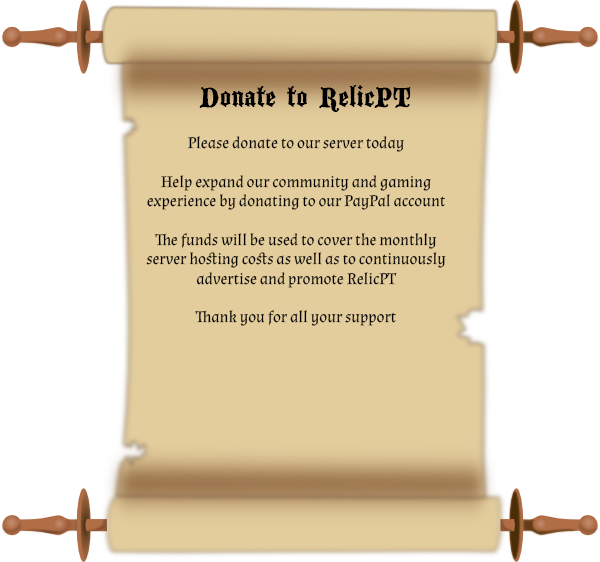
<style>
.page{position:relative;width:600px;height:562px;background:#ffffff}
.page>*{position:absolute;margin:0}
.t1{font:30px "BlackwoodCastle";color:#000000}
.t2{font:16.1px "Almendra-Regular";color:#000000}
</style>
<div class="page">
<p class="t1" style="left:199px;top:85px;width:212px;height:27px">Donate to RelicPT</p>
<p class="t2" style="left:146px;top:136px;width:300px;height:190px;text-align:center">Please donate to our server today<br><br>Help expand our community and gaming<br>experience by donating to our PayPal account<br><br>The funds will be used to cover the monthly<br>server hosting costs as well as to continuously<br>advertise and promote RelicPT<br><br>Thank you for all your support</p>
</div>
